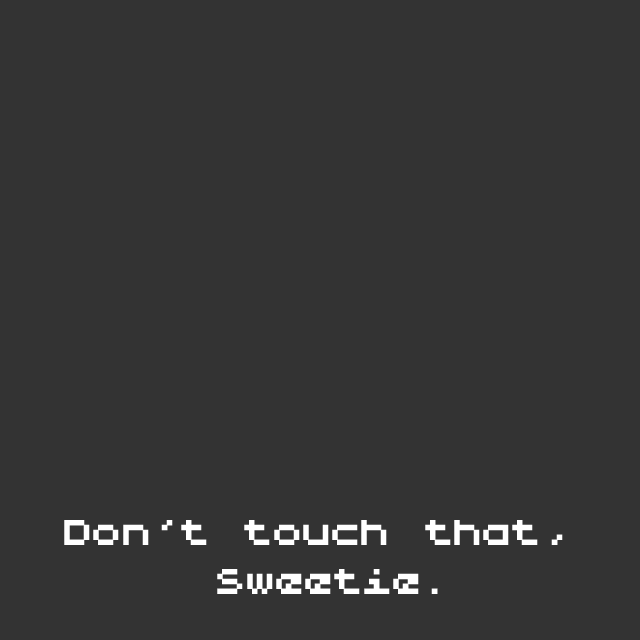
<style>
.page{position:relative;width:640px;height:640px;background:#333333}
.page>*{position:absolute;margin:0}
.t1{font:41px "LilliputSteps-Regular";color:#ffffff}
</style>
<div class="page">
<p class="t1" style="left:64px;top:520px;width:499px;height:74px;text-align:center">Don’t touch that, <br>sweetie.</p>
</div>
